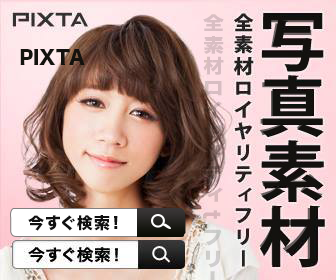
<style>
.page{position:relative;width:336px;height:280px}
.page>*{position:absolute;margin:0}
.t1{font:63.7px "Osaka";letter-spacing:0.05em;color:#14120e;scale:1.09 1}
.t2{font:76.4px "HiraKakuStdN-W8";letter-spacing:0.05em;color:#14120e;scale:1.09 1}
.t3{font:18px "HiraKakuStdN-W8";color:#14120e}
.t4{font:16px "HiraKakuStdN-W8";letter-spacing:0.05em;color:#101010}
</style>
<div class="page">
<p class="t1" style="left:259px;top:16px;width:64px;height:249px;opacity:0.76">写真素材<br><span class="t2">材</span></p>
<p class="t3" style="left:20px;top:49px;width:65px;height:16px">PIXTA</p>
<p class="t4" style="left:28px;top:215px;width:90px;height:16px">今すぐ検索!</p>
</div>
